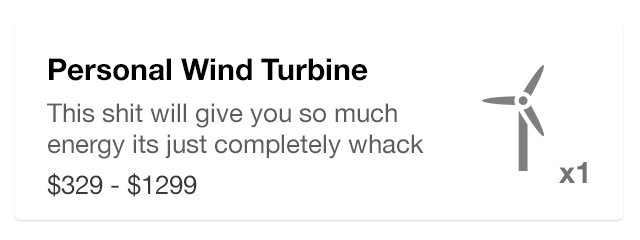
<style>
.page{position:relative;width:640px;height:240px;background:#ffffff}
.page>*{position:absolute;margin:0}
.t1{font:26px "HelveticaNeue";color:#5d5d5d}
.t2{font:30px "HelveticaNeue-Bold";color:#000000}
.t3{font:26px "HelveticaNeue";color:#393939}
.t4{font:30px "HelveticaNeue-Bold";color:#737373}
</style>
<div class="page">
<p class="t1" style="left:47px;top:58px;width:377px;height:139px"><span class="t2">Personal Wind Turbine<br></span>This shit will give you so much energy its just completely whack<br><span class="t3">$329 - $1299</span></p>
<p class="t4" style="left:559px;top:162px;width:28px;height:21px">x1</p>
</div>
